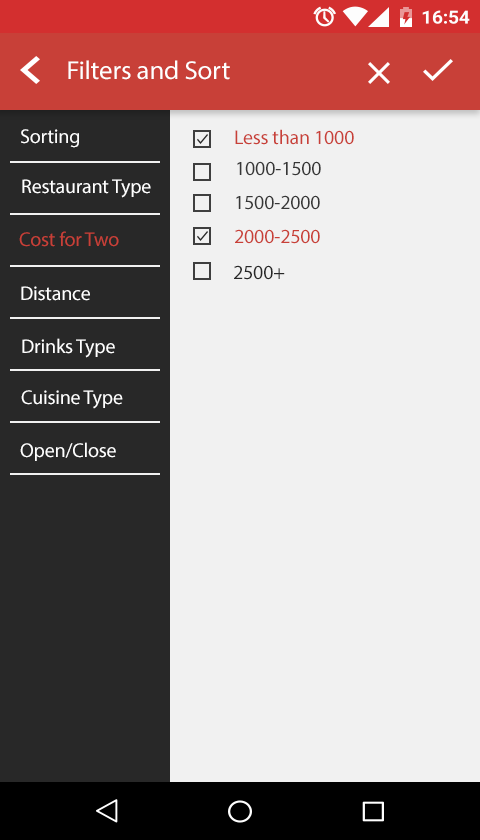
<style>
.page{position:relative;width:480px;height:840px;background:#f1f1f1}
.page>*{position:absolute;margin:0}
.t1{font:26.1px "MyriadPro-Regular";letter-spacing:-0.01em;color:#ffffff;scale:1.03 1}
.t2{font:20px "MyriadPro-Regular";letter-spacing:-0.01em;color:#fefefe}
.t3{font:20px "MyriadPro-Regular";letter-spacing:-0.01em;color:#c94038}
.t4{font:20px "MyriadPro-Regular";letter-spacing:-0.01em;color:#373737}
.t5{font:20px "MyriadPro-Regular";letter-spacing:-0.01em;color:#ffffff}
.t6{font:20px "MyriadPro-Regular";letter-spacing:-0.01em;color:#282828}
</style>
<div class="page">
<p class="t1" style="left:68px;top:60px;width:162px;height:20px">Filters and Sort</p>
<p class="t2" style="left:21px;top:129px;width:58px;height:19px">Sorting</p>
<p class="t3" style="left:235px;top:129px;width:119px;height:16px">Less than 1000</p>
<p class="t4" style="left:237px;top:161px;width:84px;height:15px">1000-1500</p>
<p class="t5" style="left:22px;top:179px;width:129px;height:19px">Restaurant Type</p>
<p class="t4" style="left:236px;top:195px;width:84px;height:15px">1500-2000</p>
<p class="t3" style="left:19px;top:231px;width:100px;height:16px">Cost for Two</p>
<p class="t3" style="left:235px;top:229px;width:85px;height:15px">2000-2500</p>
<p class="t6" style="left:234px;top:265px;width:51px;height:15px">2500+</p>
<p class="t5" style="left:21px;top:286px;width:69px;height:15px">Distance</p>
<p class="t5" style="left:22px;top:338px;width:93px;height:20px">Drinks Type</p>
<p class="t5" style="left:21px;top:390px;width:102px;height:19px">Cuisine Type</p>
<p class="t5" style="left:20px;top:442px;width:96px;height:19px">Open/Close</p>
</div>
